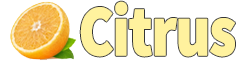
<style>
.page{position:relative;width:240px;height:62px;background:#ffffff}
.page>*{position:absolute;margin:0}
.t1{font:72.6px "SourceSansPro-Black";letter-spacing:-0.045em;color:#fff29e;font-weight:bold;scale:0.83 1}
</style>
<div class="page">
<p class="t1" style="left:80px;top:1px;width:155px;height:56px">Citrus</p>
</div>
